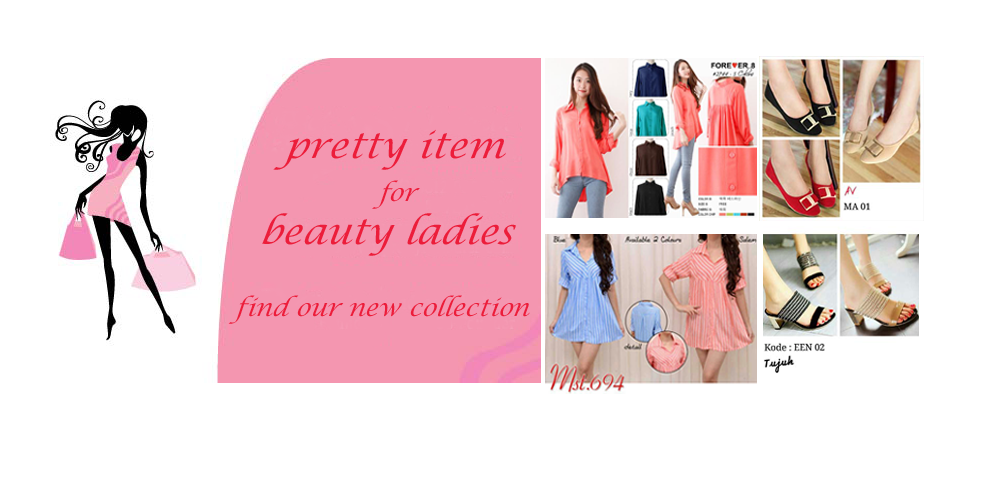
<style>
.page{position:relative;width:1000px;height:500px;background:#ffffff}
.page>*{position:absolute;margin:0}
.t1{font:24px "LucidaCalligraphy-Italic";color:#ec1d3a;font-style:italic}
.t2{font:48px "HarlowSolid";color:#1a43ad;font-style:italic}
.t3{font:36px "LucidaCalligraphy-Italic";color:#ec1d3a;font-style:italic}
</style>
<div class="page">
<p class="t1" style="left:228px;top:129px;width:302px;height:195px"><span class="t2">    </span><span class="t3">pretty item<br>            </span>for <br>   <span class="t3">beauty ladies<br><br></span>find our new collection</p>
</div>
